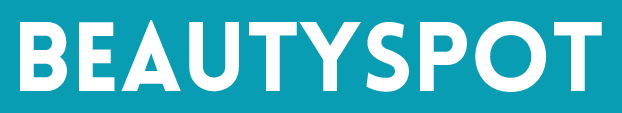
<style>
.page{position:relative;width:622px;height:113px;background:#099db3}
.page>*{position:absolute;margin:0}
.t1{font:96px "Lovelo-Black";color:#ffffff}
</style>
<div class="page">
<p class="t1" style="left:20px;top:20px;width:582px;height:72px">Beautyspot</p>
</div>
